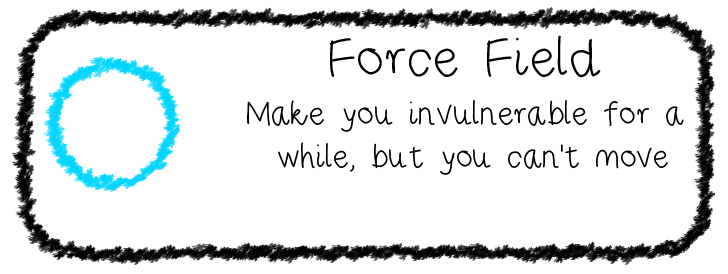
<style>
.page{position:relative;width:728px;height:274px;background:#ffffff}
.page>*{position:absolute;margin:0}
.t1{font:60px "RiseStarHand";color:#000000}
.t2{font:36px "RiseStarHand";color:#000000}
</style>
<div class="page">
<p class="t1" style="left:330px;top:35px;width:271px;height:43px">Force Field</p>
<p class="t2" style="left:247px;top:100px;width:437px;height:75px;text-align:center">Make you invulnerable for a <br>while, but you can’t move</p>
</div>
